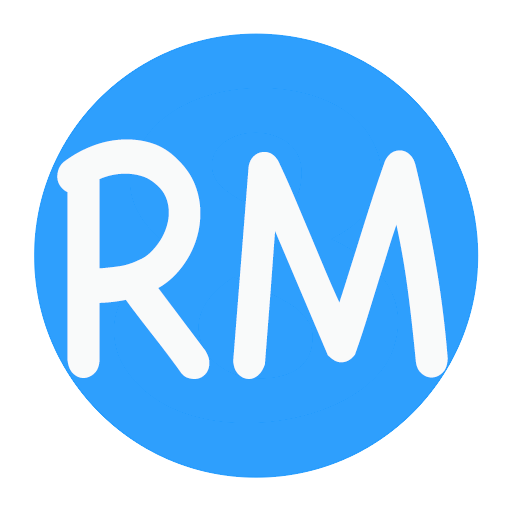
<style>
.page{position:relative;width:512px;height:512px;background:#2e9ffd}
.page>*{position:absolute;margin:0}
.t1{font:326.4px "ChalkboardSE-Regular";letter-spacing:0.001em;color:#f9fafa;font-weight:bold;scale:0.83 1}
</style>
<div class="page">
<p class="t1" style="left:57px;top:139px;width:391px;height:240px">RM</p>
</div>
